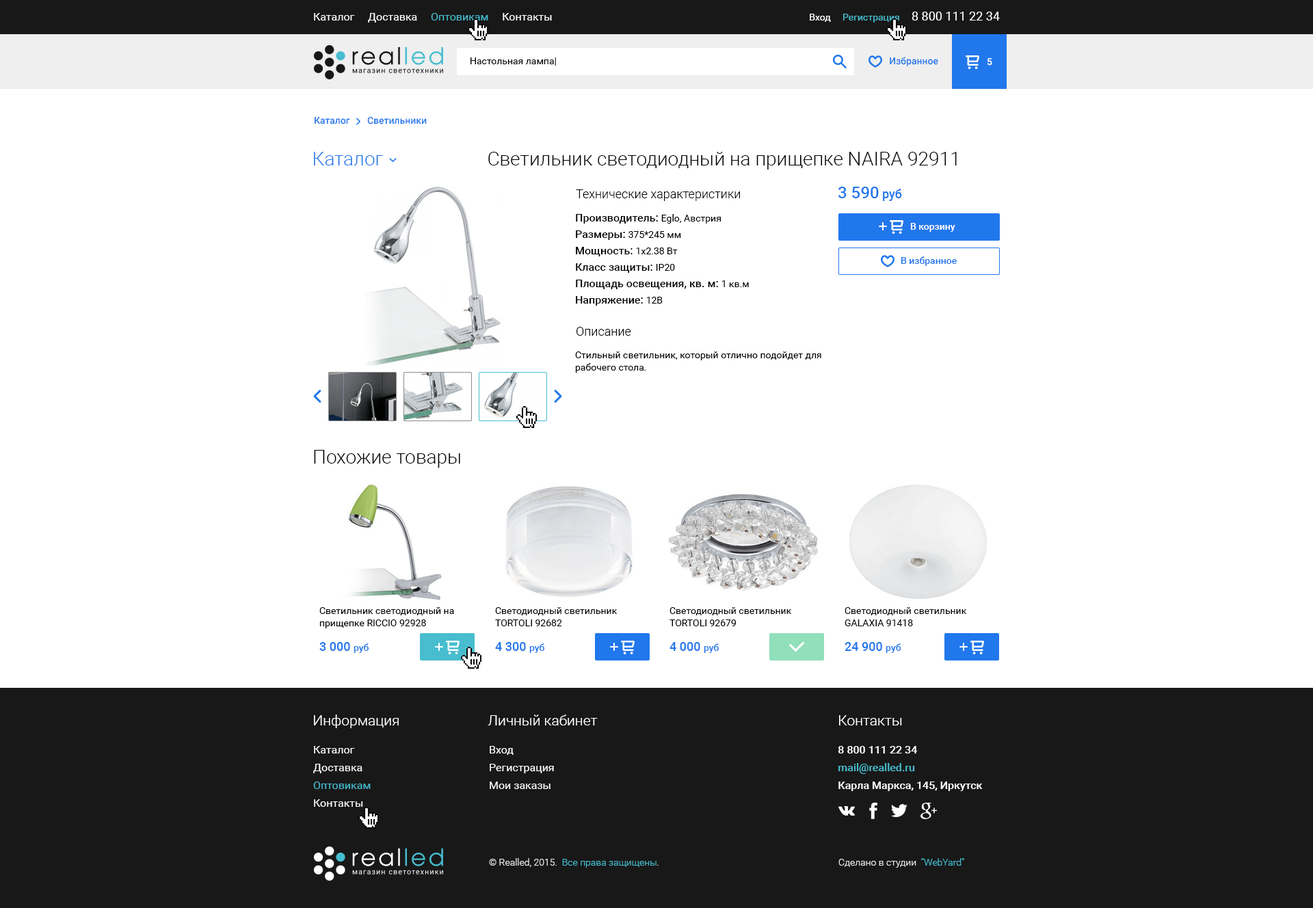
<style>
.page{position:relative;width:1313px;height:908px;background:#ffffff}
.page>*{position:absolute;margin:0}
.t1{font:10.9px "Roboto-Regular";color:#ffffff}
.t2{font:10.9px "Roboto-Regular";color:#47bdcf}
.t3{font:12.3px "Roboto-Regular";color:#ffffff}
.t4{font:9.6px "Roboto-Regular";color:#ffffff}
.t5{font:9.6px "Roboto-Regular";color:#47bdcf}
.t6{font:9.6px "Roboto-Regular";color:#000000}
.t7{font:9.6px "Roboto-Medium";color:#2177ec}
.t8{font:9.6px "Roboto-Medium";color:#ffffff}
.t9{font:19.1px "Roboto-Light";color:#2177ec}
.t10{font:19.1px "Roboto-Light";color:#000000}
.t11{font:12.3px "Roboto-Light";color:#000000}
.t12{font:16.4px "Roboto-Medium";color:#2177ec}
.t13{font:12.3px "Roboto-Medium";color:#2177ec}
.t14{font:10.9px/16.4px "Roboto-Medium";color:#000000}
.t15{font:9.6px/16.4px "Roboto-Regular";color:#000000}
.t16{font:9.6px/12.3px "Roboto-Regular";color:#000000}
.t17{font:9.6px/12.3px "Roboto-Regular";color:#010101}
</style>
<div class="page">
<p class="t1" style="left:314px;top:13px;width:238px;height:10px">Каталог     Доставка     <span class="t2">Оптовикам</span>     Контакты</p>
<p class="t3" style="left:810px;top:12px;width:190px;height:11px"><span class="t4">Вход     </span><span class="t5">Регистрация     </span>8 800 111 22 34</p>
<p class="t6" style="left:470px;top:57px;width:86px;height:9px">Настольная лампа|</p>
<p class="t7" style="left:890px;top:57px;width:48px;height:9px">Избранное</p>
<p class="t8" style="left:987px;top:58px;width:5px;height:8px">5</p>
<p class="t7" style="left:315px;top:117px;width:35px;height:7px">Каталог</p>
<p class="t7" style="left:367px;top:117px;width:60px;height:7px">Светильники</p>
<p class="t9" style="left:314px;top:152px;width:69px;height:13px">Каталог</p>
<p class="t10" style="left:488px;top:152px;width:469px;height:18px">Светильник светодиодный на прищепке NAIRA 92911</p>
<p class="t11" style="left:576px;top:189px;width:164px;height:12px">Технические характеристики</p>
<p class="t12" style="left:838px;top:187px;width:64px;height:14px">3 590<span class="t13"> руб</span></p>
<p class="t14" style="left:576px;top:214px;width:173px;height:92px">Производитель: <span class="t15">Eglo, Австрия<br></span>Размеры: <span class="t15">375*245 мм<br></span>Мощность: <span class="t15">1x2.38 Вт<br></span>Класс защиты: <span class="t15">IP20<br></span>Площадь освещения, кв. м: <span class="t15">1 кв.м<br></span>Напряжение: <span class="t15">12В</span></p>
<p class="t8" style="left:910px;top:223px;width:45px;height:9px">В корзину</p>
<p class="t7" style="left:901px;top:256px;width:56px;height:10px">В избранное</p>
<p class="t11" style="left:576px;top:327px;width:55px;height:9px">Описание</p>
<p class="t16" style="left:575px;top:352px;width:246px;height:21px">Стильный светильник, который отлично подойдет для рабочего стола.</p>
<p class="t10" style="left:314px;top:450px;width:146px;height:18px">Похожие товары</p>
<p class="t17" style="left:319px;top:607px;width:135px;height:21px">Светильник светодиодный на прищепке RICCIO 92928</p>
<p class="t17" style="left:495px;top:607px;width:123px;height:19px">Светодиодный светильник <br>TORTOLI 92682</p>
<p class="t17" style="left:669px;top:607px;width:123px;height:19px">Светодиодный светильник <br>TORTOLI 92679</p>
<p class="t17" style="left:845px;top:607px;width:122px;height:19px">Светодиодный светильник <br>GALAXIA 91418</p>
<p class="t13" style="left:319px;top:642px;width:50px;height:11px">3 000 <span class="t7">руб</span></p>
<p class="t13" style="left:495px;top:642px;width:49px;height:11px">4 300 <span class="t7">руб</span></p>
<p class="t13" style="left:669px;top:642px;width:50px;height:11px">4 000 <span class="t7">руб</span></p>
<p class="t13" style="left:845px;top:642px;width:56px;height:11px">24 900 <span class="t7">руб</span></p>
</div>
